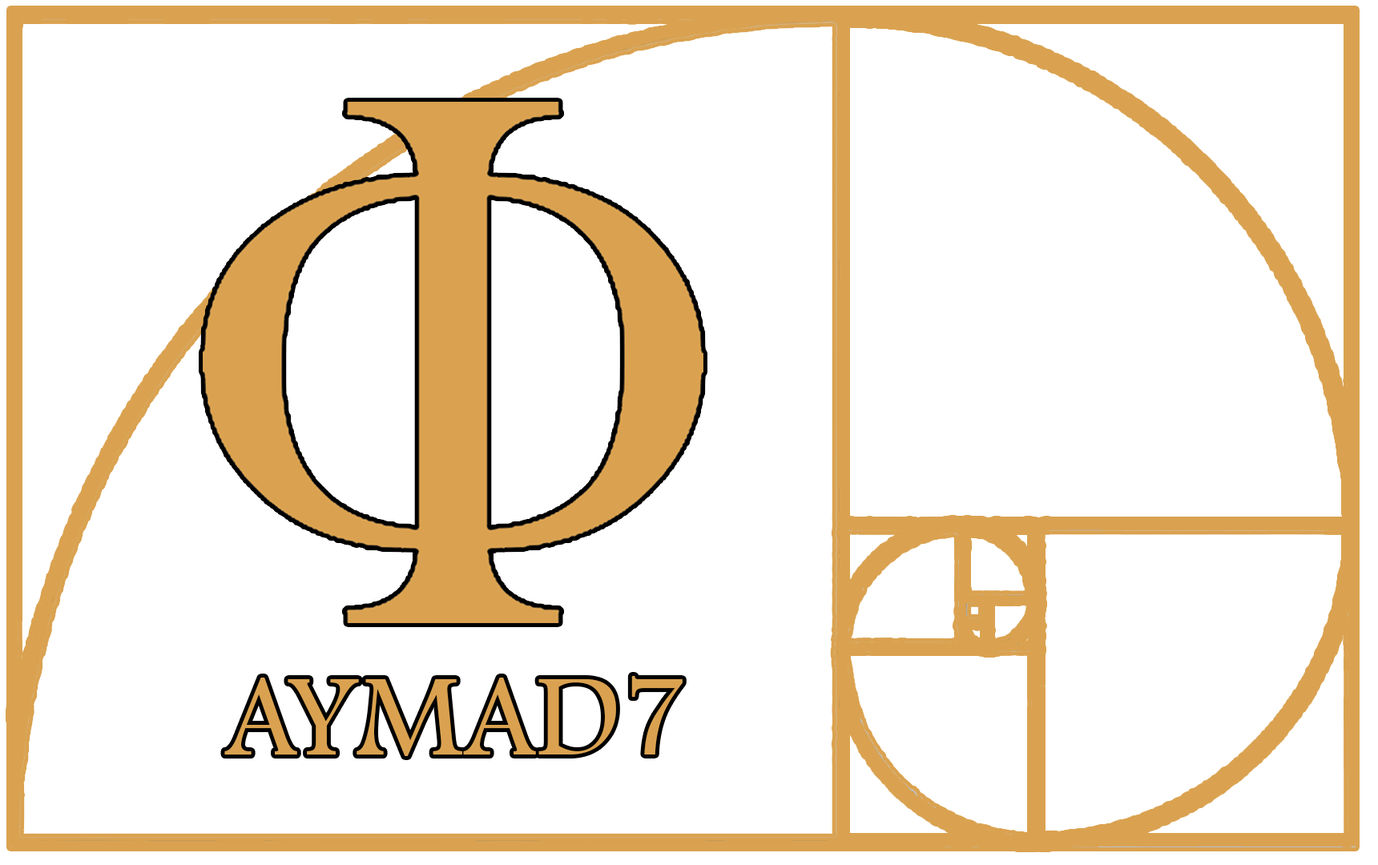
<style>
.page{position:relative;width:1378px;height:865px;background:#ffffff}
.page>*{position:absolute;margin:0}
.t1{font:120.2px "FootlightMTLight";color:#daa250}
</style>
<div class="page">
<p class="t1" style="left:224px;top:676px;width:459px;height:80px">AYMAD7</p>
</div>
